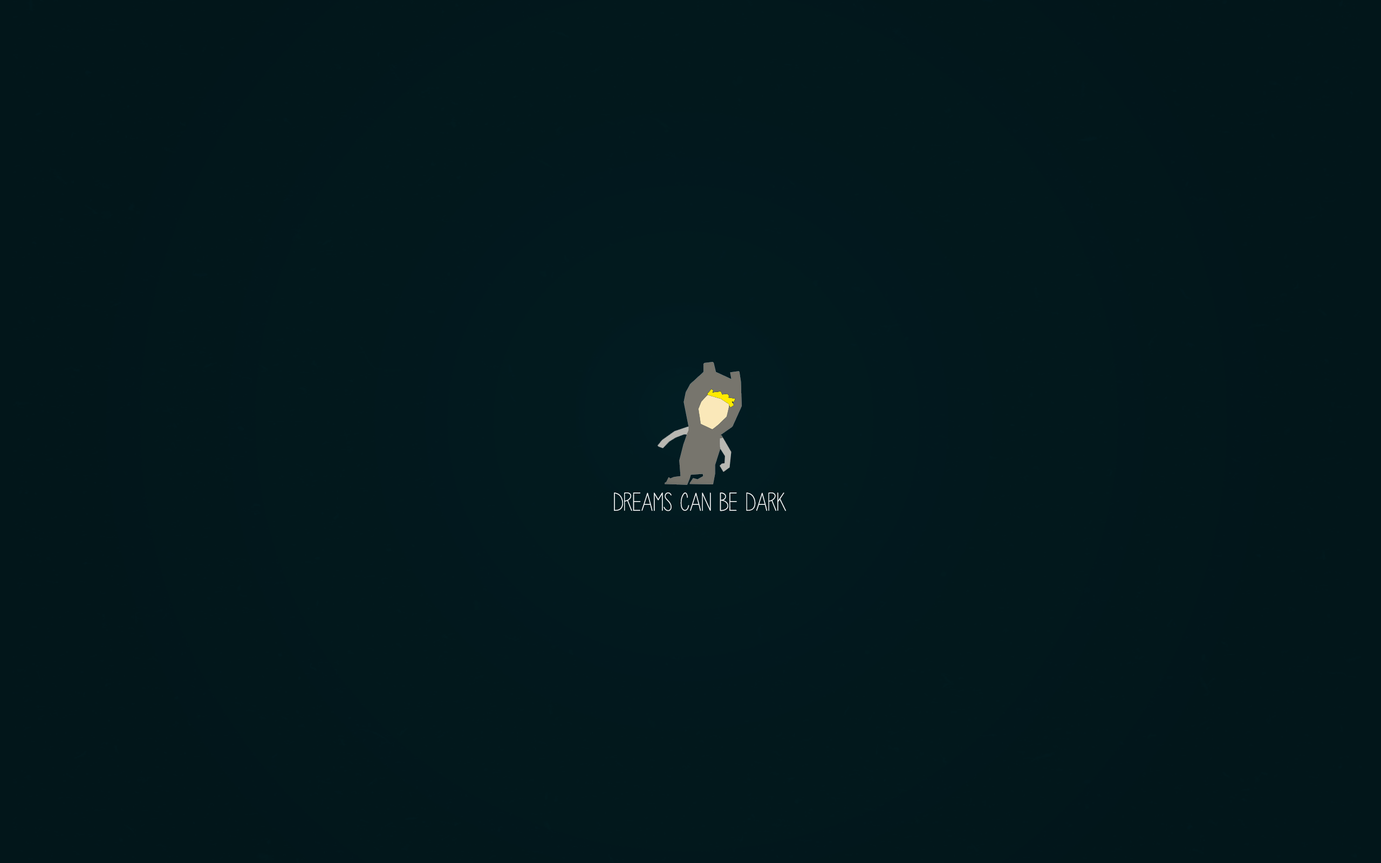
<style>
.page{position:relative;width:1381px;height:863px;background:#02161a}
.page>*{position:absolute;margin:0}
.t1{font:25.9px "Penelope-Anne";letter-spacing:0.014em;color:#f7fbfc}
</style>
<div class="page">
<p class="t1" style="left:614px;top:493px;width:172px;height:18px">Dreams Can BE Dark</p>
</div>
